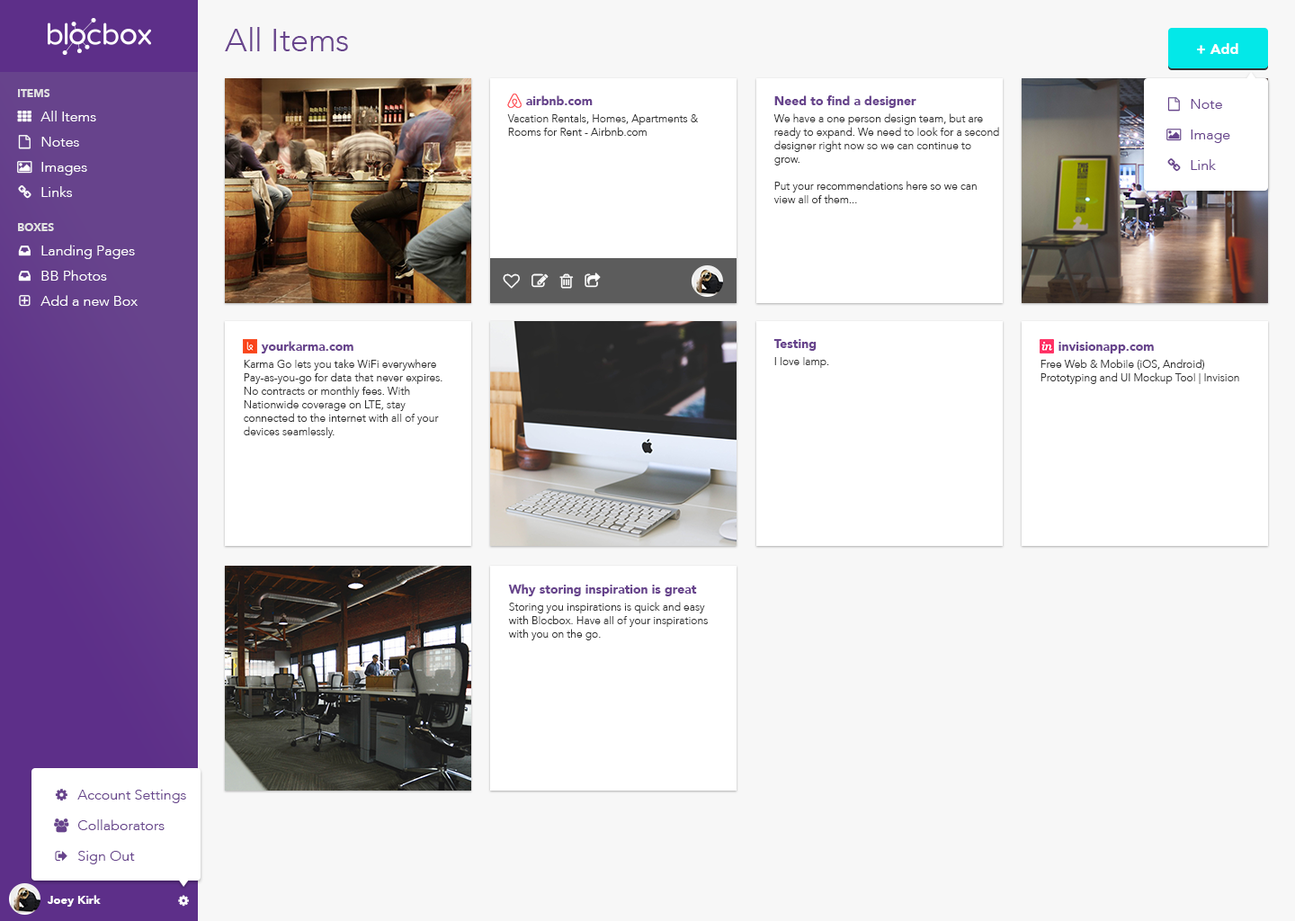
<style>
.page{position:relative;width:1295px;height:921px;background:#f7f7f7}
.page>*{position:absolute;margin:0}
.t1{font:32.4px "Avenir-Light";color:#67438c}
.t2{font:14.4px "Avenir-Black";color:#ffffff}
.t3{font:10.8px "Avenir-Black";color:#e2e2e2;text-transform:uppercase}
.t4{font:12.6px "Avenir-Black";color:#67438c}
.t5{font:14.4px/30.6px "Avenir-Light";color:#67438c}
.t6{font:14.4px/25.2px "Avenir-Light";color:#ffffff}
.t7{font:10.8px/13.5px "Avenir-Light";color:#333333}
.t8{font:10.8px "Avenir-Light";color:#333333}
.t9{font:11.7px "Avenir-Black";color:#ffffff}
</style>
<div class="page">
<p class="t1" style="left:225px;top:27px;width:123px;height:24px">All Items</p>
<p class="t2" style="left:1197px;top:43px;width:41px;height:11px">+ Add</p>
<p class="t3" style="left:18px;top:89px;width:32px;height:8px">Items</p>
<p class="t4" style="left:526px;top:95px;width:67px;height:10px">airbnb.com</p>
<p class="t4" style="left:774px;top:95px;width:142px;height:13px">Need to find a designer</p>
<p class="t5" style="left:1191px;top:99px;width:39px;height:71px">Note<br>Image<br>Link</p>
<p class="t6" style="left:40px;top:111px;width:56px;height:86px">All Items<br>Notes<br>Images<br>Links</p>
<p class="t7" style="left:773px;top:113px;width:226px;height:90px">We have a one person design team, but are<br>ready to expand. We need to look for a second<br>designer right now so we can continue to<br>grow.<br><br>Put your recommendations here so we can<br>view all of them...</p>
<p class="t7" style="left:507px;top:114px;width:192px;height:22px">Vacation Rentals, Homes, Apartments &amp;<br>Rooms for Rent - Airbnb.com</p>
<p class="t3" style="left:18px;top:223px;width:36px;height:8px">boxes</p>
<p class="t6" style="left:40px;top:245px;width:98px;height:61px">Landing Pages<br>BB Photos<br>Add a new Box</p>
<p class="t4" style="left:261px;top:341px;width:92px;height:12px">yourkarma.com</p>
<p class="t4" style="left:773px;top:339px;width:44px;height:12px">Testing</p>
<p class="t4" style="left:1058px;top:342px;width:96px;height:11px">invisionapp.com</p>
<p class="t7" style="left:244px;top:359px;width:198px;height:79px">Karma Go lets you take WiFi everywhere<br>Pay-as-you-go for data that never expires.<br>No contracts or monthly fees. With<br>Nationwide coverage on LTE, stay<br>connected to the internet with all of your<br>devices seamlessly.</p>
<p class="t8" style="left:774px;top:357px;width:55px;height:11px">I love lamp.</p>
<p class="t7" style="left:1040px;top:359px;width:199px;height:25px">Free Web &amp; Mobile (iOS, Android)<br>Prototyping and UI Mockup Tool | Invision</p>
<p class="t4" style="left:508px;top:584px;width:189px;height:12px">Why storing inspiration is great</p>
<p class="t7" style="left:508px;top:602px;width:200px;height:38px">Storing you inspirations is quick and easy<br>with Blocbox. Have all of your inspirations <br>with you on the go.</p>
<p class="t5" style="left:77px;top:790px;width:109px;height:74px">Account Settings<br>Collaborators<br>Sign Out</p>
<p class="t9" style="left:47px;top:895px;width:54px;height:11px">Joey Kirk</p>
</div>
